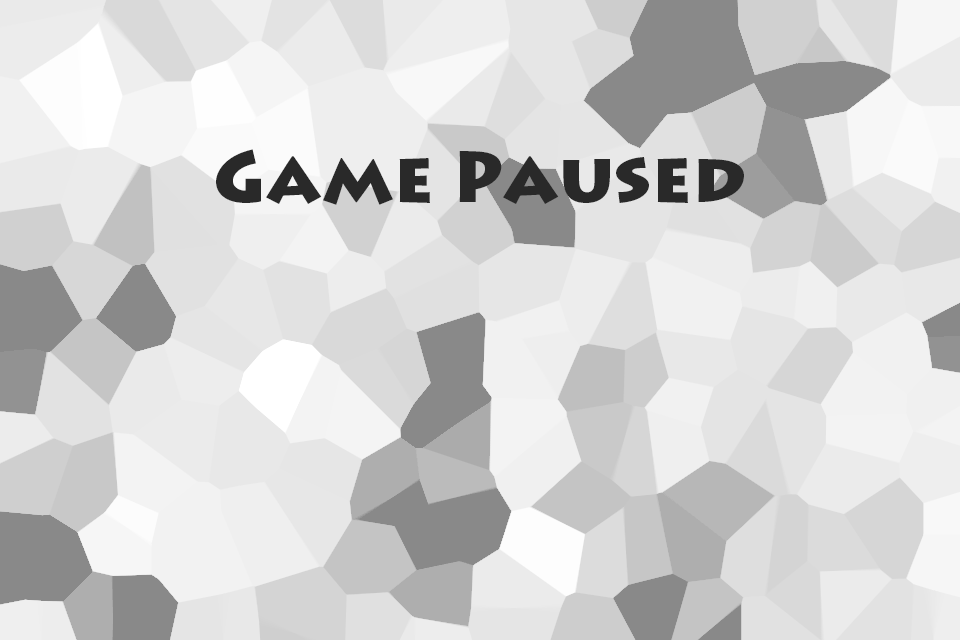
<style>
.page{position:relative;width:960px;height:640px}
.page>*{position:absolute;margin:0}
.t1{font:72px "LithosPro-Black";color:#292929}
</style>
<div class="page">
<p class="t1" style="left:216px;top:149px;width:528px;height:56px">Game Paused</p>
</div>
